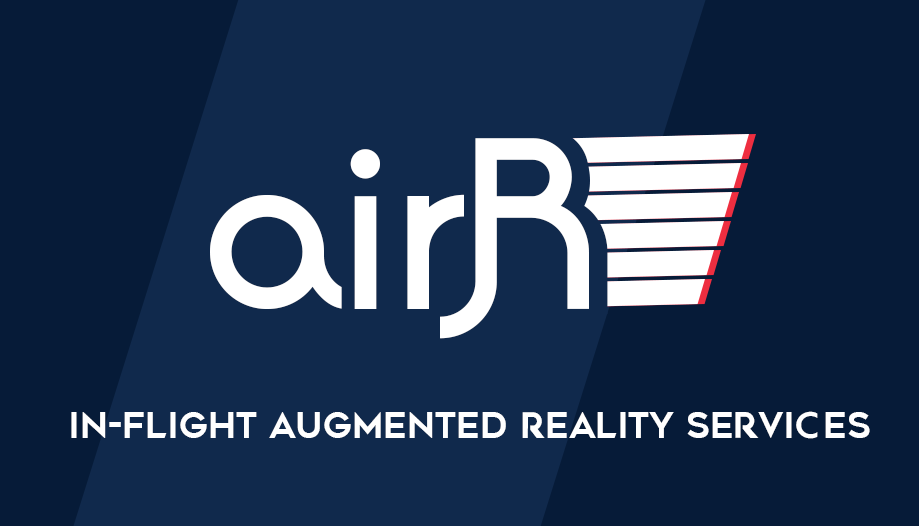
<style>
.page{position:relative;width:919px;height:526px;background:#061b38}
.page>*{position:absolute;margin:0}
.t1{font:247.3px "Quadranta-Bold"}
.t2{font:228.2px "Quadranta-Bold";color:#ffffff}
.t3{font:35.2px "CaptainMarvel";color:#ffffff}
</style>
<div class="page">
<p class="t1" style="left:196px;top:129px;width:412px;height:217px">airR</p>
<p class="t2" style="left:210px;top:138px;width:379px;height:201px">airR</p>
<p class="t3" style="left:71px;top:411px;width:799px;height:28px">In-flight Augmented Reality Services</p>
</div>
